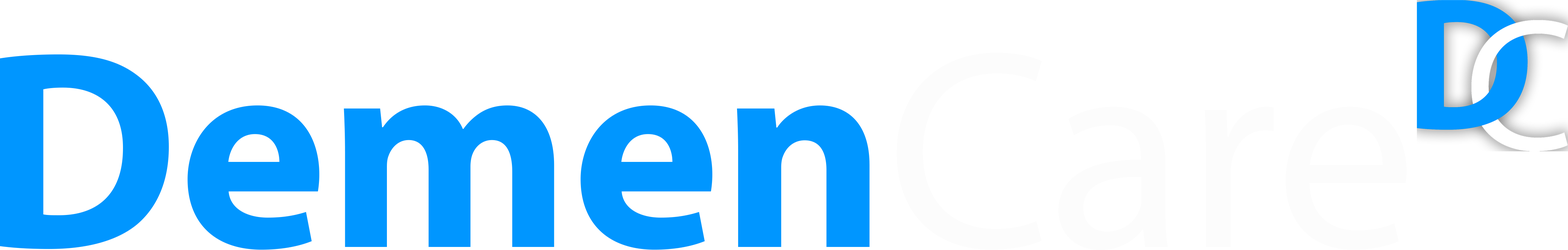
<style>
.page{position:relative;width:1568px;height:250px;background:#ffffff}
.page>*{position:absolute;margin:0}
.t1{font:283.1px "MyriadPro-Bold";color:#0096ff}
.t2{font:283.1px "MyriadPro-Regular";color:#fcfcfc}
</style>
<div class="page">
<p class="t1" style="left:0px;top:53px;width:1407px;height:197px">Demen<span class="t2">Care</span></p>
</div>
